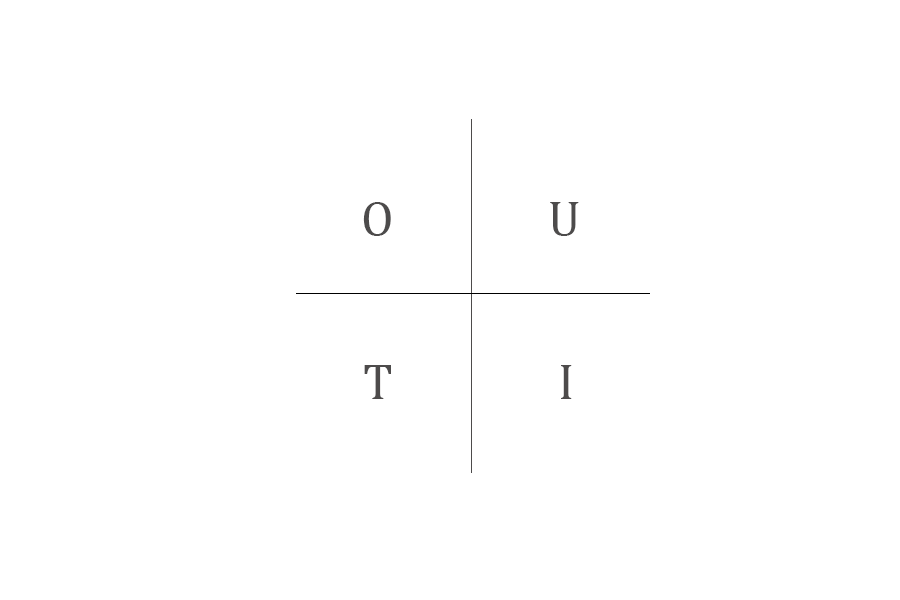
<style>
.page{position:relative;width:900px;height:600px;background:#ffffff}
.page>*{position:absolute;margin:0}
.t1{font:12px "Cambria";color:#4d4b4b}
</style>
<div class="page">
<p class="t1" style="left:363px;top:202px;width:216px;height:34px">O              U</p>
<p class="t1" style="left:364px;top:365px;width:208px;height:34px">T               I</p>
</div>
